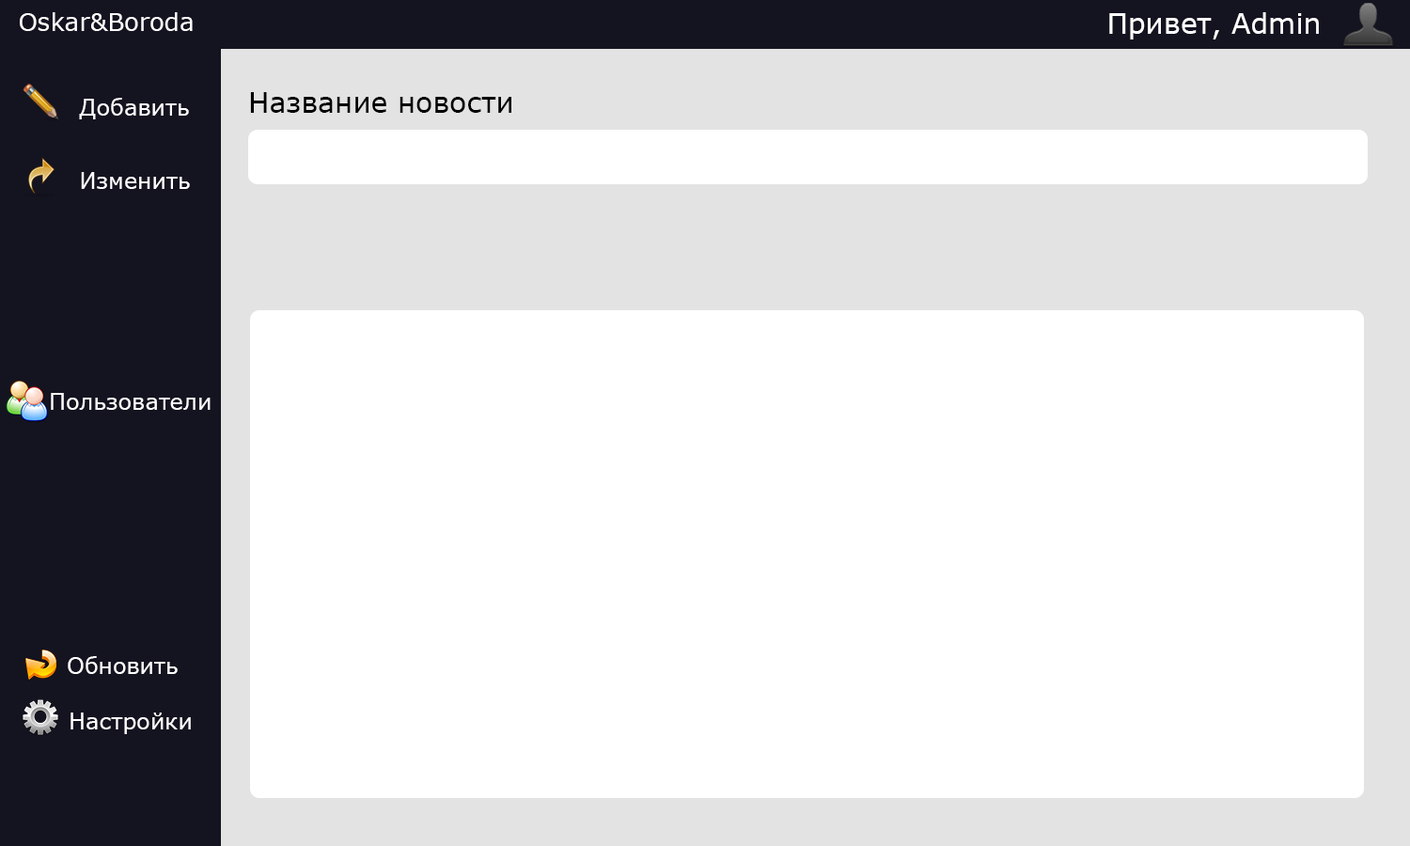
<style>
.page{position:relative;width:1410px;height:846px;background:#ffffff}
.page>*{position:absolute;margin:0}
.t1{font:24.4px "Verdana";color:#ffffff}
.t2{font:28.2px "Verdana";color:#ffffff}
.t3{font:22.6px "Verdana";color:#ffffff}
.t4{font:28.2px "Verdana";color:#000000}
</style>
<div class="page">
<p class="t1" style="left:20px;top:12px;width:173px;height:19px">Oskar&amp;Boroda</p>
<p class="t2" style="left:1109px;top:12px;width:210px;height:27px">Привет, Admin</p>
<p class="t3" style="left:79px;top:98px;width:110px;height:21px">Добавить</p>
<p class="t4" style="left:250px;top:92px;width:261px;height:21px">Название новости</p>
<p class="t3" style="left:81px;top:172px;width:109px;height:17px">Изменить</p>
<p class="t3" style="left:51px;top:393px;width:160px;height:17px">Пользователи</p>
<p class="t3" style="left:68px;top:656px;width:110px;height:18px">Обновить</p>
<p class="t3" style="left:70px;top:712px;width:121px;height:22px">Настройки</p>
</div>
